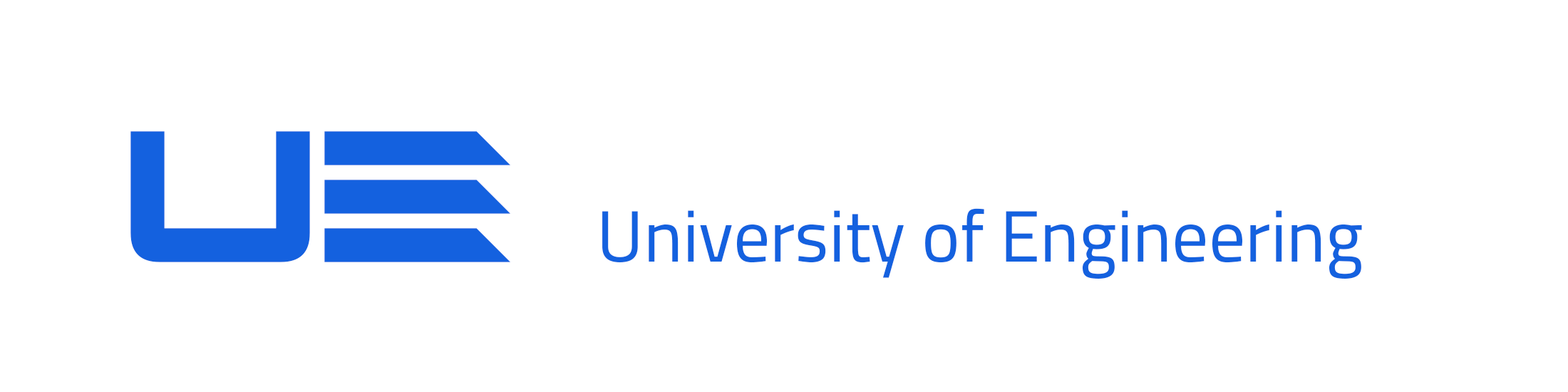
<style>
.page{position:relative;width:1568px;height:392px;background:#ffffff}
.page>*{position:absolute;margin:0}
.t1{font:193.9px "AlienMine";color:#1461df}
.t2{font:72.7px "Cairo-Regular";color:#1461df}
</style>
<div class="page">
<p class="t1" style="left:130px;top:131px;width:380px;height:131px">UE</p>
<p class="t2" style="left:602px;top:208px;width:760px;height:71px">University of Engineering</p>
</div>
